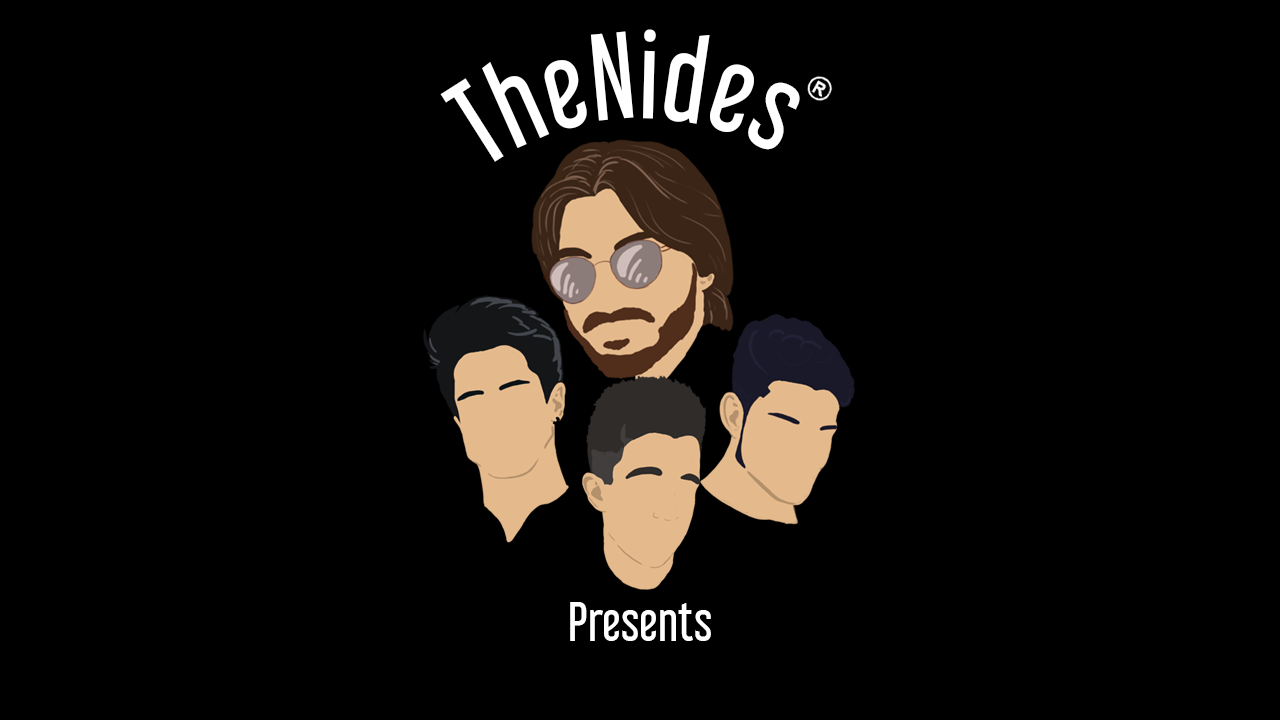
<style>
.page{position:relative;width:1280px;height:720px;background:#000000}
.page>*{position:absolute;margin:0}
.t1{font:110px "LibelSuitRg-Regular";color:#ffffff}
.t2{font:50px "LibelSuitRg-Regular";color:#ffffff}
</style>
<div class="page">
<p class="t1" style="left:440px;top:29px;width:360px;height:133px;rotate:90deg">TheNides</p>
<p class="t2" style="left:570px;top:602px;width:141px;height:39px">Presents</p>
</div>
